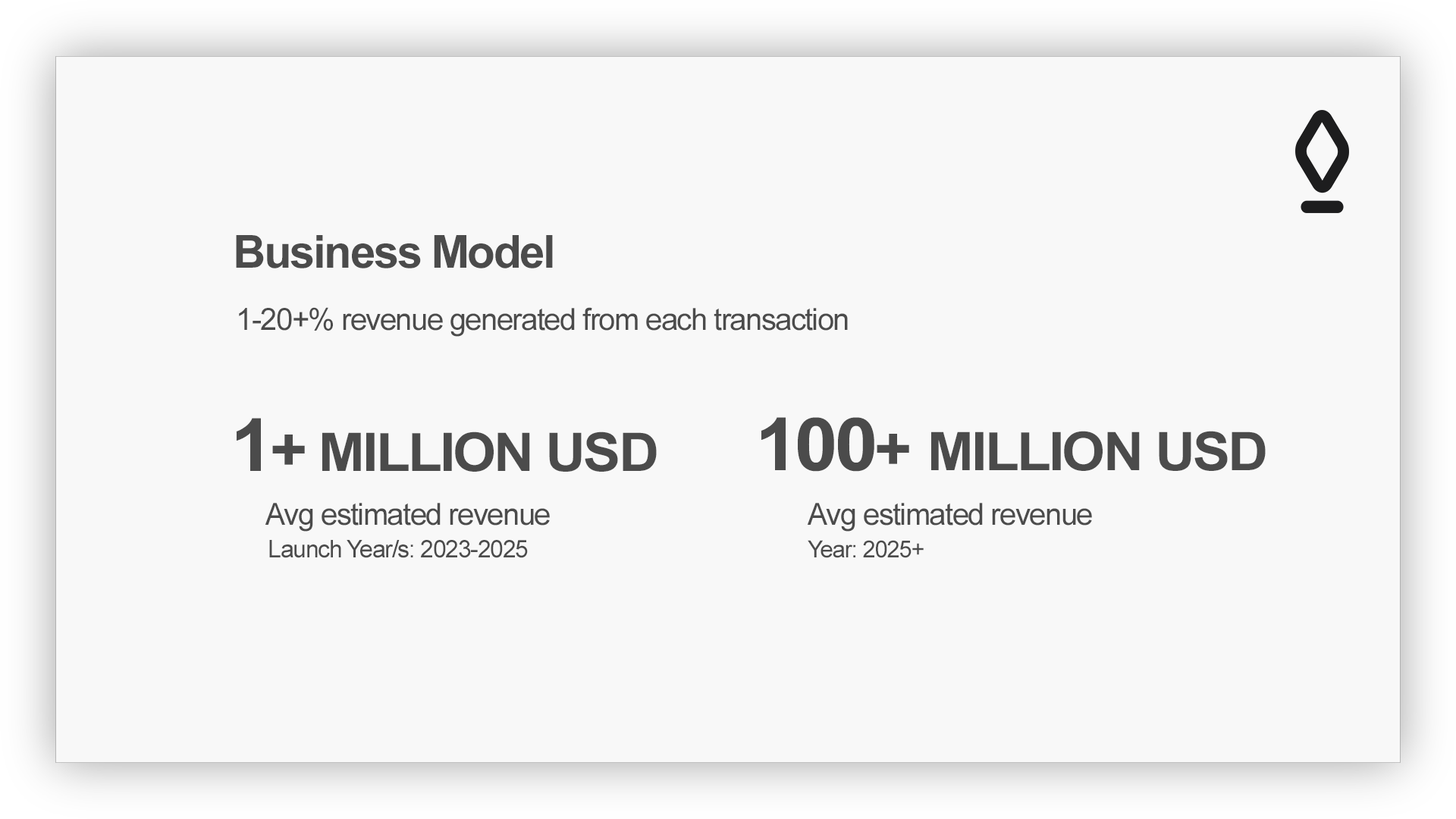
<style>
.page{position:relative;width:1456px;height:819px;background:#f8f8f8}
.page>*{position:absolute;margin:0}
.t1{font:45.5px "Arial-BoldMT";letter-spacing:-0.04em;color:#4b4b4b}
.t2{font:30.3px "ArialMT";letter-spacing:-0.04em;color:#4b4b4b}
.t3{font:53.1px "Arial-BoldMT";letter-spacing:-0.04em;color:#4b4b4b;scale:1.05 1}
.t4{font:73.1px "Arial-BoldMT";letter-spacing:-0.04em;color:#4b4b4b;scale:1.05 1}
.t5{font:60.7px "Arial-BoldMT";letter-spacing:-0.04em;color:#4b4b4b;scale:1.05 1}
.t6{font:24.3px "ArialMT";letter-spacing:-0.04em;color:#4b4b4b}
.t7{font:23.5px "ArialMT";letter-spacing:-0.04em;color:#4b4b4b}
</style>
<div class="page">
<p class="t1" style="left:236px;top:235px;width:317px;height:33px">Business Model</p>
<p class="t2" style="left:239px;top:307px;width:609px;height:30px">1-20+% revenue generated from each transaction</p>
<p class="t3" style="left:236px;top:418px;width:421px;height:54px"><span class="t4">1</span><span class="t5">+</span> MILLION USD</p>
<p class="t3" style="left:761px;top:417px;width:505px;height:55px"><span class="t4">100</span><span class="t5">+ </span>MILLION USD</p>
<p class="t2" style="left:265px;top:503px;width:285px;height:29px">Avg estimated revenue</p>
<p class="t2" style="left:807px;top:503px;width:285px;height:29px">Avg estimated revenue</p>
<p class="t6" style="left:269px;top:540px;width:259px;height:18px">Launch Year/s: 2023-2025</p>
<p class="t7" style="left:808px;top:540px;width:116px;height:18px">Year: 2025+</p>
</div>
